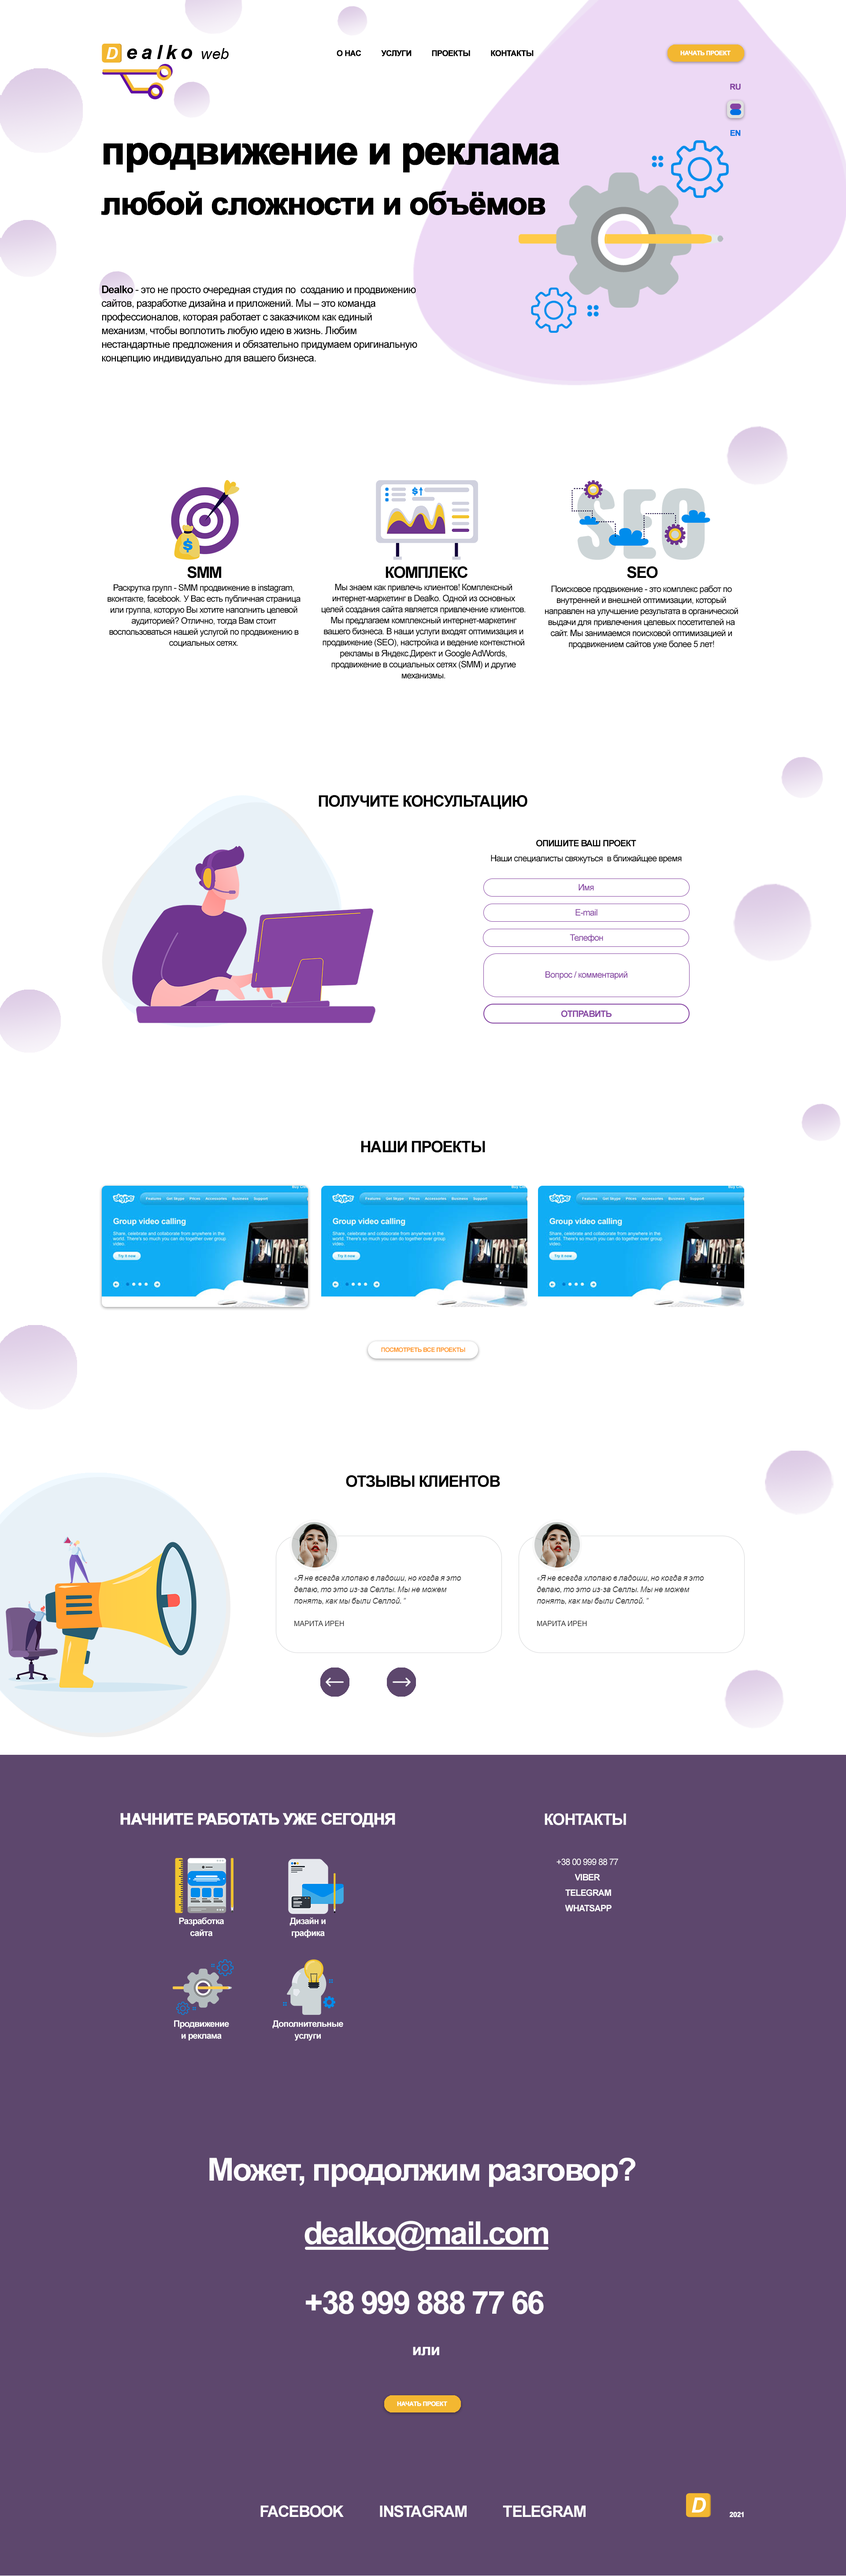
<style>
.page{position:relative;width:846px;height:2576px;background:#ffffff}
.page>*{position:absolute;margin:0}
.t1{font:7.9px "Arial-BoldMT";letter-spacing:-0.05em;color:#000000;font-weight:bold}
.t2{font:6.2px "Arial-BoldMT";letter-spacing:-0.05em;color:#ffffff;font-weight:bold}
.t3{font:7.9px "Arial-BoldMT";letter-spacing:-0.05em;color:#8544a2;font-weight:bold}
.t4{font:7.9px "Arial-BoldMT";letter-spacing:-0.05em;color:#0071e3;font-weight:bold}
.t5{font:31.7px/50.3px "Arial-BoldMT";letter-spacing:-0.05em;color:#000000;font-weight:bold}
.t6{font:39.7px/50.3px "Arial-BoldMT";letter-spacing:-0.05em;color:#000000;font-weight:bold}
.t7{font:10.6px/13.7px "ArialMT";letter-spacing:-0.05em;color:#000000}
.t8{font:10.6px/13.7px "Arial-BoldMT";letter-spacing:-0.05em;color:#000000}
.t9{font:15.9px "Arial-BoldMT";letter-spacing:-0.05em;color:#000000}
.t10{font:8.8px/11px "ArialMT";letter-spacing:-0.05em;color:#000000}
.t11{font:8.8px "Arial-BoldMT";letter-spacing:-0.05em;color:#000000}
.t12{font:8.8px "ArialMT";letter-spacing:-0.05em;color:#000000}
.t13{font:8.8px "ArialMT";letter-spacing:-0.05em;color:#8544a2}
.t14{font:8.8px "Arial-BoldMT";letter-spacing:-0.05em;color:#8544a2}
.t15{font:6.2px "Arial-BoldMT";letter-spacing:-0.05em;color:#ff9a2e}
.t16{font:15.9px "Arial-BoldMT";letter-spacing:-0.05em;color:#ffffff;font-weight:bold}
.t17{font:15.9px "Arial-BoldMT";letter-spacing:-0.05em;color:#ffffff}
.t18{font:8.8px/15.4px "Arial-BoldMT";letter-spacing:-0.05em;color:#fefefe}
.t19{font:8.8px/15.4px "ArialMT";letter-spacing:-0.05em;color:#fefefe}
.t20{font:8.8px/11.9px "Arial-BoldMT";letter-spacing:-0.05em;color:#ffffff}
.t21{font:31.7px "Arial-BoldMT";letter-spacing:-0.05em;color:#fefefe}
.t22{font:15.9px "Arial-BoldMT";letter-spacing:-0.05em;color:#fefefe}
.t23{font:7.1px "Arial-BoldMT";letter-spacing:-0.05em;color:#ffffff;font-weight:bold}
</style>
<div class="page">
<p class="t1" style="left:337px;top:50px;width:197px;height:6px">О НАС          УСЛУГИ          ПРОЕКТЫ          КОНТАКТЫ</p>
<p class="t2" style="left:681px;top:50px;width:50px;height:6px">НАЧАТЬ ПРОЕКТ</p>
<p class="t3" style="left:730px;top:84px;width:11px;height:6px">RU</p>
<p class="t4" style="left:730px;top:130px;width:11px;height:6px">EN</p>
<p class="t5" style="left:101px;top:143px;width:459px;height:72px"><span class="t6">продвижение и реклама<br></span>любой сложности и объёмов</p>
<p class="t7" style="left:102px;top:285px;width:315px;height:79px"><span class="t8">Dealko</span> - это не просто очередная студия по  созданию и продвижению<br>сайтов, разработке дизайна и приложений. Мы – это команда<br>профессионалов, которая работает с заказчиком как единый<br>механизм, чтобы воплотить любую идею в жизнь. Любим<br>нестандартные предложения и обязательно придумаем оригинальную<br>концепцию индивидуально для вашего бизнеса.</p>
<p class="t9" style="left:187px;top:566px;width:34px;height:12px">SMM</p>
<p class="t9" style="left:386px;top:566px;width:82px;height:12px">КОМПЛЕКС</p>
<p class="t9" style="left:627px;top:566px;width:31px;height:12px">SEO</p>
<p class="t10" style="left:108px;top:584px;width:193px;height:63px;text-align:center">Раскрутка групп - SMM продвижение в instagram, вконтакте, facebook. У Вас есть публичная страница или группа, которую Вы хотите наполнить целевой аудиторией? Отлично, тогда Вам стоит воспользоваться нашей услугой по продвижению в социальных сетях.</p>
<p class="t10" style="left:322px;top:584px;width:203px;height:95px;text-align:center">Мы знаем как привлечь клиентов! Комплексный интернет-маркетинг в Dealko. Одной из основных целей создания сайта является привлечение клиентов. Мы предлагаем комплексный интернет-маркетинг вашего бизнеса. В наши услуги входят оптимизация и продвижение (SEO), настройка и ведение контекстной рекламы в Яндекс.Директ и Google AdWords, продвижение в социальных сетях (SMM) и другие механизмы.</p>
<p class="t10" style="left:545px;top:585px;width:193px;height:64px;text-align:center">Поисковое продвижение - это комплекс работ по внутренней и внешней оптимизации, который направлен на улучшение результата в органической выдачи для привлечения целевых посетителей на сайт. Мы занимаемся поисковой оптимизацией и продвижением сайтов уже более 5 лет!</p>
<p class="t9" style="left:319px;top:795px;width:209px;height:14px">ПОЛУЧИТЕ КОНСУЛЬТАЦИЮ</p>
<p class="t11" style="left:536px;top:840px;width:101px;height:7px">ОПИШИТЕ ВАШ ПРОЕКТ</p>
<p class="t12" style="left:491px;top:855px;width:191px;height:9px">Наши специалисты свяжуться  в ближайщее время</p>
<p class="t13" style="left:579px;top:884px;width:15px;height:6px">Имя</p>
<p class="t13" style="left:576px;top:909px;width:22px;height:7px">E-mail</p>
<p class="t13" style="left:570px;top:934px;width:33px;height:8px">Телефон</p>
<p class="t13" style="left:546px;top:971px;width:82px;height:8px">Вопрос / комментарий</p>
<p class="t14" style="left:561px;top:1010px;width:51px;height:7px">ОТПРАВИТЬ</p>
<p class="t9" style="left:361px;top:1140px;width:124px;height:13px">НАШИ ПРОЕКТЫ</p>
<p class="t15" style="left:381px;top:1347px;width:84px;height:5px">ПОСМОТРЕТЬ ВСЕ ПРОЕКТЫ</p>
<p class="t9" style="left:346px;top:1475px;width:154px;height:12px">ОТЗЫВЫ КЛИЕНТОВ</p>
<p class="t16" style="left:120px;top:1813px;width:275px;height:15px">НАЧНИТЕ РАБОТАТЬ УЖЕ СЕГОДНЯ</p>
<p class="t17" style="left:545px;top:1813px;width:81px;height:12px">КОНТАКТЫ</p>
<p class="t18" style="left:557px;top:1858px;width:61px;height:54px;text-align:center"><span class="t19">+38 00 999 88 77 <br></span>VIBER <br>TELEGRAM<br>WHATSAPP</p>
<p class="t20" style="left:179px;top:1917px;width:45px;height:19px;text-align:center">Разработка<br>сайта</p>
<p class="t20" style="left:290px;top:1917px;width:36px;height:21px;text-align:center">Дизайн и<br>графика</p>
<p class="t20" style="left:174px;top:2020px;width:55px;height:20px;text-align:center">Продвижение<br>и реклама</p>
<p class="t20" style="left:272px;top:2020px;width:71px;height:21px;text-align:center">Дополнительные<br>услуги</p>
<p class="t21" style="left:209px;top:2158px;width:427px;height:29px">Может, продолжим разговор?</p>
<p class="t21" style="left:305px;top:2221px;width:243px;height:30px">dealko@mail.com</p>
<p class="t21" style="left:306px;top:2291px;width:238px;height:23px">+38 999 888 77 66</p>
<p class="t22" style="left:413px;top:2347px;width:26px;height:9px">или</p>
<p class="t2" style="left:397px;top:2401px;width:50px;height:5px">НАЧАТЬ ПРОЕКТ</p>
<p class="t22" style="left:261px;top:2505px;width:325px;height:12px">FACEBOOK          INSTAGRAM          TELEGRAM</p>
<p class="t23" style="left:730px;top:2512px;width:14px;height:5px">2021</p>
</div>
